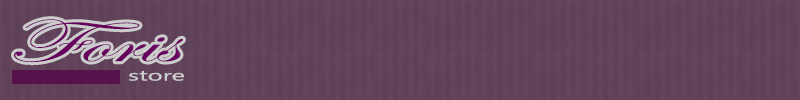
<style>
.page{position:relative;width:800px;height:100px}
.page>*{position:absolute;margin:0}
.t1{font:61.8px "EdwardianScriptITC";color:#66005e;scale:1.71 1}
.t2{font:14.7px "Leelawadee";color:#cccccc;scale:1.76 1}
</style>
<div class="page">
<p class="t1" style="left:14px;top:19px;width:169px;height:44px">Foris</p>
<p class="t2" style="left:129px;top:70px;width:55px;height:11px">store</p>
</div>
